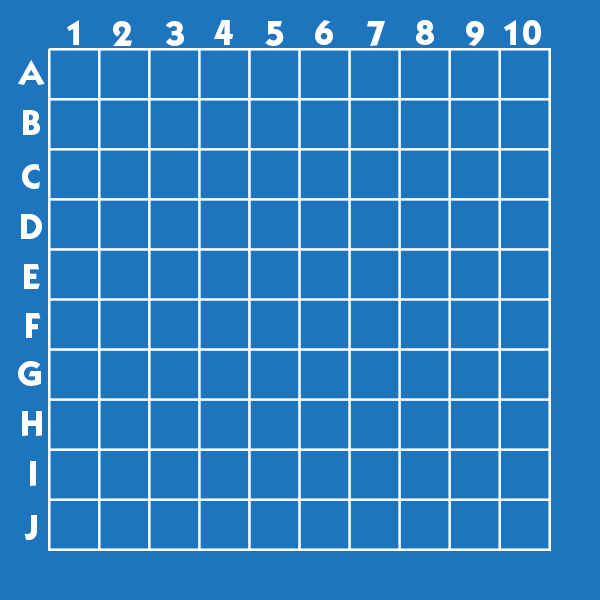
<style>
.page{position:relative;width:600px;height:600px;background:#1d75bd}
.page>*{position:absolute;margin:0}
.t1{font:36px "ITCKabelStd-Bold";color:#ffffff}
</style>
<div class="page">
<p class="t1" style="left:67px;top:20px;width:12px;height:25px">1</p>
<p class="t1" style="left:113px;top:21px;width:19px;height:25px">2</p>
<p class="t1" style="left:165px;top:21px;width:19px;height:25px">3</p>
<p class="t1" style="left:214px;top:20px;width:19px;height:25px">4</p>
<p class="t1" style="left:265px;top:21px;width:19px;height:25px">5</p>
<p class="t1" style="left:315px;top:20px;width:18px;height:25px">6</p>
<p class="t1" style="left:367px;top:21px;width:18px;height:25px">7</p>
<p class="t1" style="left:416px;top:20px;width:18px;height:25px">8</p>
<p class="t1" style="left:466px;top:21px;width:18px;height:25px">9</p>
<p class="t1" style="left:504px;top:20px;width:37px;height:25px">10</p>
<p class="t1" style="left:18px;top:60px;width:27px;height:25px">A</p>
<p class="t1" style="left:23px;top:110px;width:17px;height:25px">B</p>
<p class="t1" style="left:22px;top:164px;width:18px;height:25px">C</p>
<p class="t1" style="left:21px;top:214px;width:21px;height:25px">D</p>
<p class="t1" style="left:24px;top:264px;width:16px;height:25px">E</p>
<p class="t1" style="left:26px;top:313px;width:15px;height:25px">F</p>
<p class="t1" style="left:18px;top:361px;width:23px;height:25px">G</p>
<p class="t1" style="left:22px;top:411px;width:20px;height:25px">H</p>
<p class="t1" style="left:30px;top:461px;width:6px;height:25px">I</p>
<p class="t1" style="left:24px;top:515px;width:13px;height:25px">J</p>
</div>
